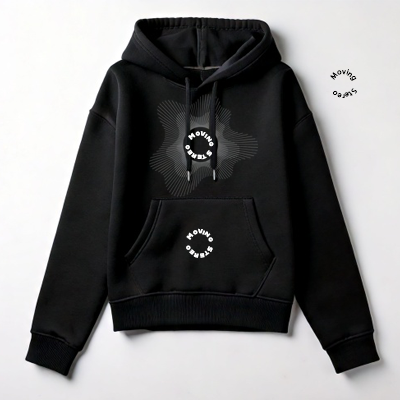
<style>
.page{position:relative;width:400px;height:400px}
.page>*{position:absolute;margin:0}
.t1{font:7.8px "MyriadPro-Regular";color:#000000}
.t2{font:6.6px "Alfarn";color:#ffffff}
</style>
<div class="page">
<p class="t1" style="left:330px;top:69px;width:27px;height:29px;rotate:-69deg">Moving    Stereo</p>
<p class="t2" style="left:185px;top:131px;width:29px;height:29px;rotate:-69deg">Moving  Stereo</p>
<p class="t2" style="left:186px;top:228px;width:27px;height:30px;rotate:-69deg">Moving  Stereo</p>
</div>
